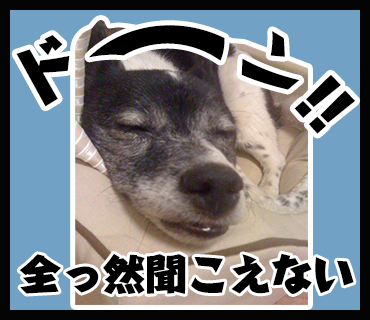
<style>
.page{position:relative;width:370px;height:320px;background:#71a1c5}
.page>*{position:absolute;margin:0}
.t1{font:59.3px "HarucraftStd-Heavy";color:#000000}
.t2{font:63.9px "HarucraftStd-Heavy";color:#000000}
.t3{font:41.9px "HarucraftStd-Heavy";color:#000000}
</style>
<div class="page">
<p class="t1" style="left:89px;top:25px;width:136px;height:36px">ー</p>
<p class="t2" style="left:16px;top:35px;width:54px;height:72px;rotate:-29deg">ド</p>
<p class="t2" style="left:241px;top:31px;width:59px;height:59px;rotate:48deg">ン</p>
<p class="t2" style="left:294px;top:74px;width:62px;height:60px;rotate:48deg">!!</p>
<p class="t3" style="left:19px;top:253px;width:335px;height:42px">全っ然聞こえない</p>
</div>
